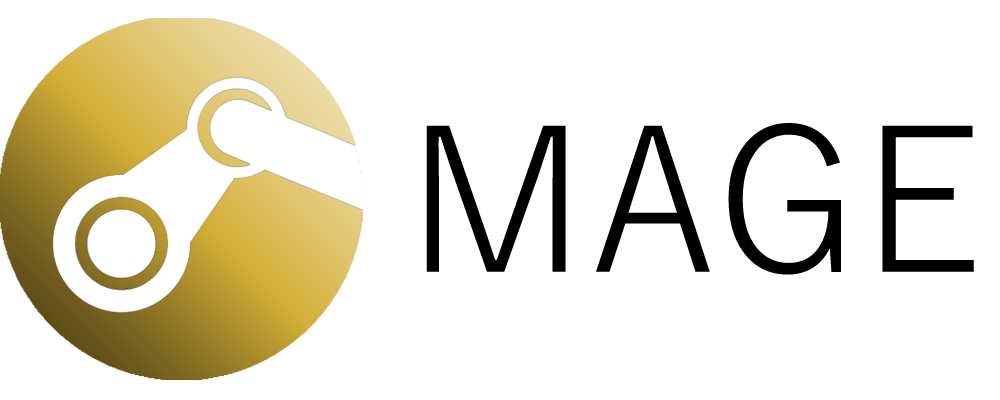
<style>
.page{position:relative;width:1000px;height:400px;background:#ffffff}
.page>*{position:absolute;margin:0}
.t1{font:200px "YuGothic-Regular";color:#000000}
</style>
<div class="page">
<p class="t1" style="left:426px;top:123px;width:548px;height:152px">MAGE</p>
</div>
